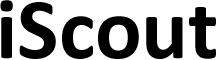
<style>
.page{position:relative;width:217px;height:60px;background:#ffffff}
.page>*{position:absolute;margin:0}
.t1{font:87px "Calibri-Bold";color:#000000}
</style>
<div class="page">
<p class="t1" style="left:0px;top:0px;width:216px;height:59px">iScout</p>
</div>
